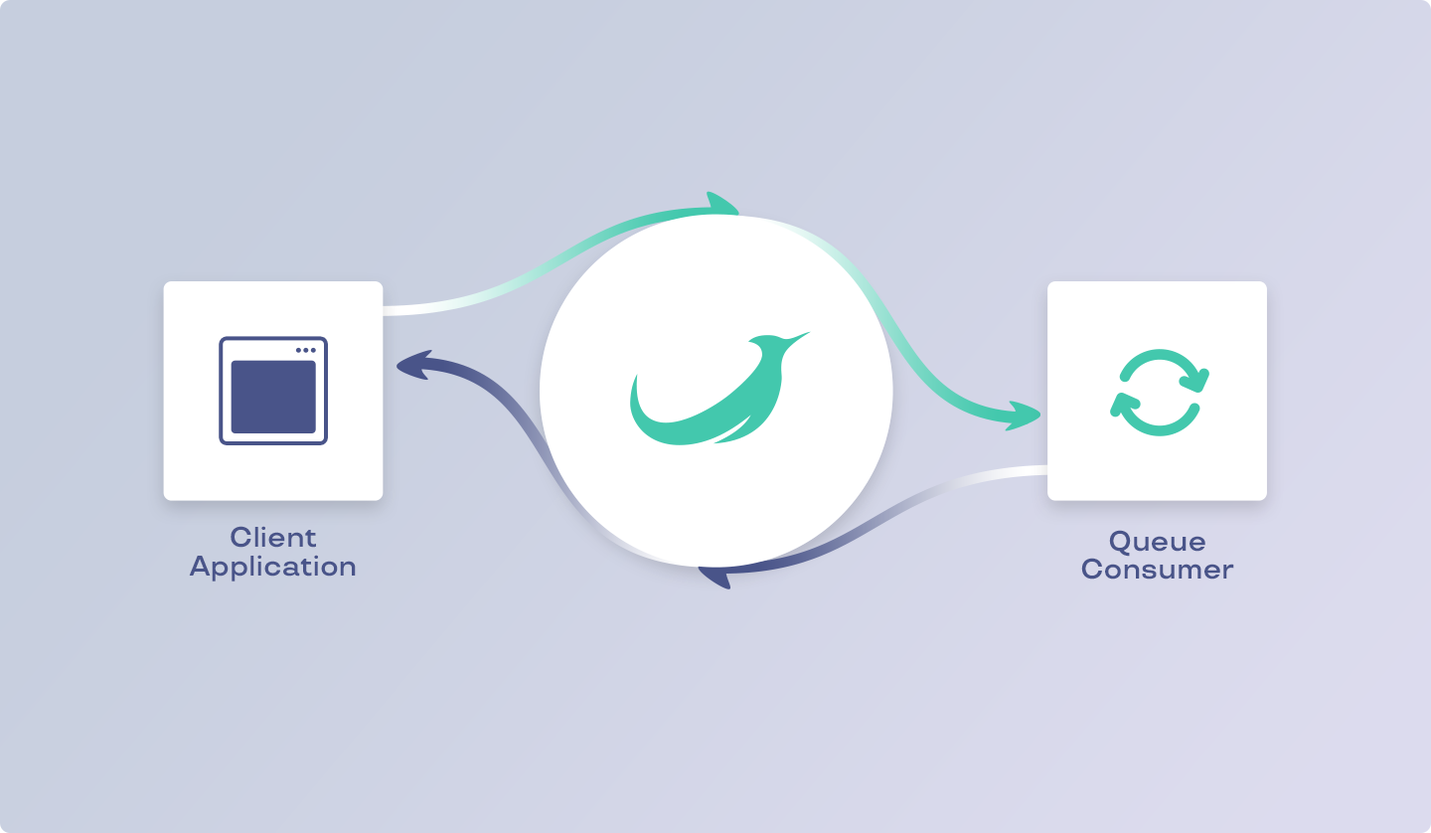
<style>
.page{position:relative;width:1431px;height:833px}
.page>*{position:absolute;margin:0}
.t1{font:28.2px/28.2px "TTTravels-DemiBold";color:#495489}
</style>
<div class="page">
<p class="t1" style="left:189px;top:526px;width:167px;height:56px;text-align:center">Client Application</p>
<p class="t1" style="left:1082px;top:530px;width:153px;height:50px;text-align:center">Queue Consumer</p>
</div>
